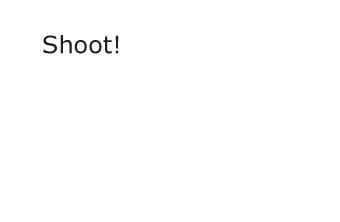
<style>
.page{position:relative;width:340px;height:222px;background:#ffffff}
.page>*{position:absolute;margin:0}
.t1{font:24px "Verdana";color:#202020}
</style>
<div class="page">
<p class="t1" style="left:43px;top:35px;width:76px;height:19px">Shoot!</p>
</div>
